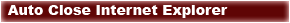
<style>
.page{position:relative;width:290px;height:23px;background:#ffffff}
.page>*{position:absolute;margin:0}
.t1{font:14px "Arial-Black";color:#ffffff}
</style>
<div class="page">
<p class="t1" style="left:7px;top:5px;width:221px;height:13px">Auto Close Internet Explorer</p>
</div>
